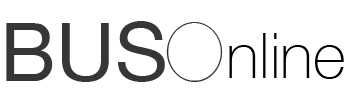
<style>
.page{position:relative;width:353px;height:100px;background:#ffffff}
.page>*{position:absolute;margin:0}
.t1{font:81.5px "HelveticaNeue";color:#363636}
.t2{font:86px "Elegantlight";color:#363636}
.t3{font:63.4px "HelveticaNeue-Thin";color:#000000}
</style>
<div class="page">
<p class="t1" style="left:6px;top:21px;width:159px;height:61px">BUS</p>
<p class="t2" style="left:166px;top:22px;width:57px;height:60px">O</p>
<p class="t3" style="left:229px;top:33px;width:115px;height:46px">nline</p>
</div>
